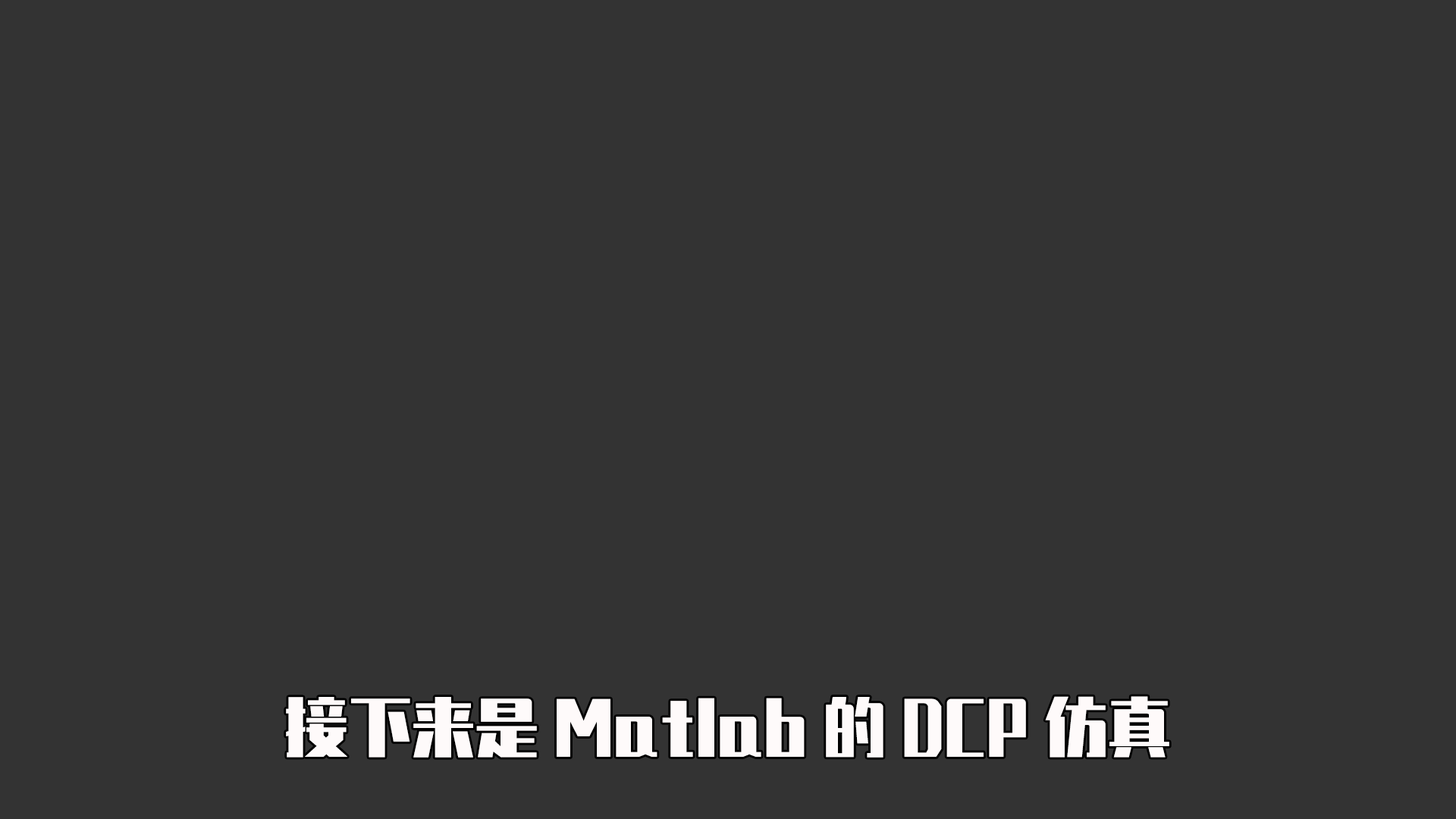
<style>
.page{position:relative;width:1456px;height:819px;background:#333333}
.page>*{position:absolute;margin:0}
.t1{font:63.2px "ZhenyanGB-Regular";color:#fefafa}
</style>
<div class="page">
<p class="t1" style="left:286px;top:696px;width:883px;height:62px">接下来是Matlab的DCP仿真</p>
</div>
